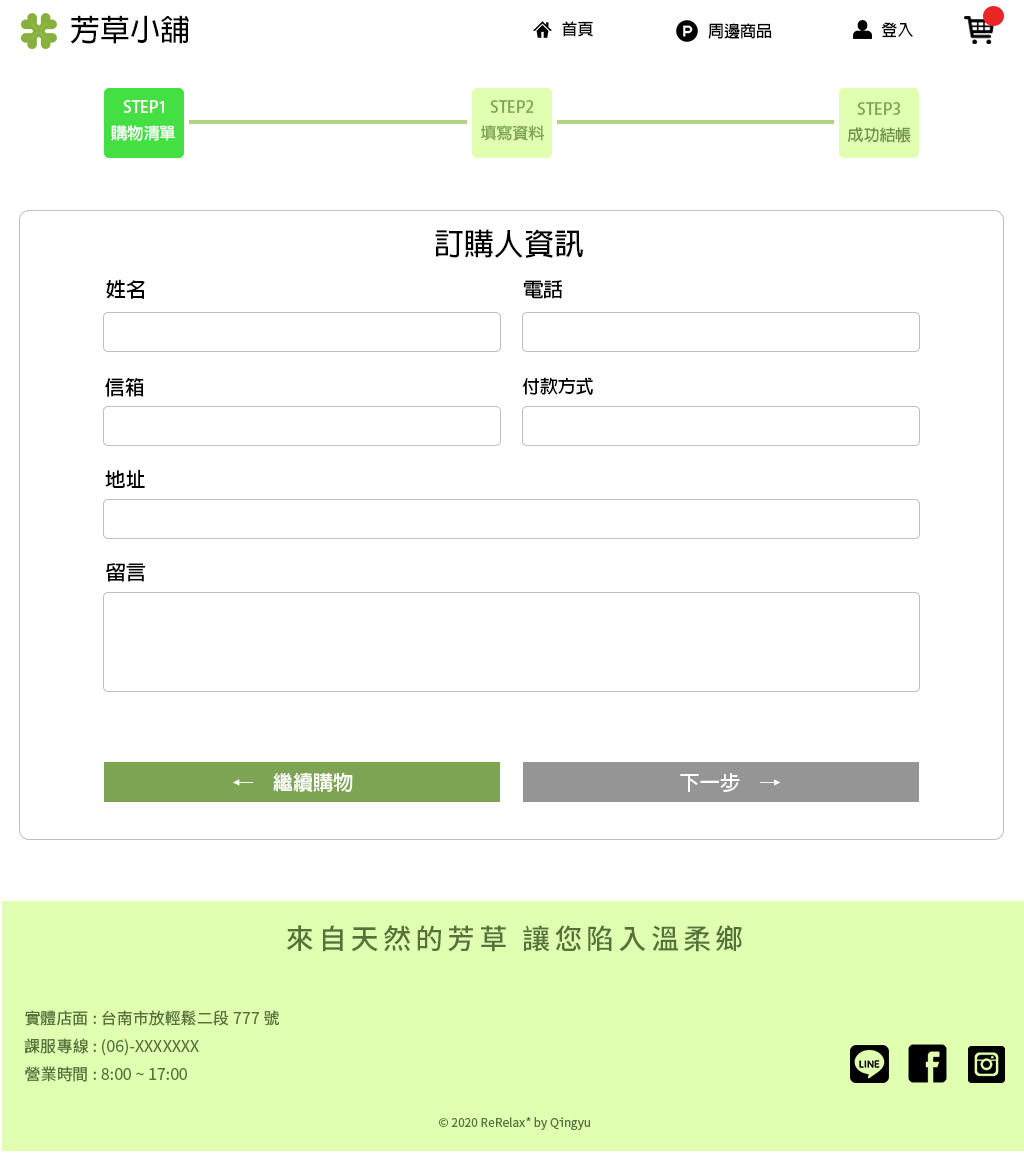
<style>
.page{position:relative;width:1024px;height:1153px;background:#ffffff}
.page>*{position:absolute;margin:0}
.t1{font:30px "AdobeFanHeitiStd-Bold";color:#000000}
.t2{font:16px "AdobeFanHeitiStd-Bold";color:#000000}
.t3{font:16px "AdobeFanHeitiStd-Bold";color:#ffffff}
.t4{font:16px "AdobeFanHeitiStd-Bold";color:#7da453}
.t5{font:16px "AdobeFanHeitiStd-Bold";color:#70934a}
.t6{font:20px "AdobeFanHeitiStd-Bold";color:#000000}
.t7{font:18px "AdobeFanHeitiStd-Bold";color:#000000}
.t8{font:20px "AdobeFanHeitiStd-Bold";color:#ffffff}
.t9{font:20px "AdobeFanHeitiStd-Bold";color:#fefefe}
.t10{font:28px "NotoSansTC-Medium";letter-spacing:0.15em;color:#567139}
.t11{font:16px "NotoSansTC-Regular";color:#567139}
.t12{font:12px "NotoSansTC-Regular";color:#567139}
</style>
<div class="page">
<p class="t1" style="left:70px;top:15px;width:119px;height:29px">芳草小舖</p>
<p class="t2" style="left:562px;top:21px;width:31px;height:16px">首頁</p>
<p class="t2" style="left:708px;top:23px;width:64px;height:16px">周邊商品</p>
<p class="t2" style="left:881px;top:22px;width:32px;height:16px">登入</p>
<p class="t3" style="left:123px;top:100px;width:41px;height:13px">STEP1</p>
<p class="t4" style="left:490px;top:100px;width:44px;height:13px">STEP2</p>
<p class="t4" style="left:857px;top:102px;width:44px;height:13px">STEP3</p>
<p class="t3" style="left:111px;top:125px;width:64px;height:16px">購物清單</p>
<p class="t4" style="left:480px;top:125px;width:64px;height:16px">填寫資料</p>
<p class="t5" style="left:847px;top:127px;width:64px;height:16px">成功結帳</p>
<p class="t1" style="left:435px;top:229px;width:148px;height:29px">訂購人資訊</p>
<p class="t6" style="left:106px;top:279px;width:39px;height:20px">姓名</p>
<p class="t6" style="left:523px;top:280px;width:39px;height:19px">電話</p>
<p class="t6" style="left:105px;top:377px;width:39px;height:20px">信箱</p>
<p class="t7" style="left:522px;top:377px;width:71px;height:18px">付款方式</p>
<p class="t6" style="left:105px;top:469px;width:40px;height:19px">地址</p>
<p class="t6" style="left:105px;top:563px;width:41px;height:19px">留言</p>
<p class="t8" style="left:233px;top:772px;width:120px;height:20px">←　繼續購物</p>
<p class="t9" style="left:680px;top:773px;width:101px;height:19px">下一步　→</p>
<p class="t10" style="left:286px;top:925px;width:456px;height:27px">來自天然的芳草 讓您陷入溫柔鄉</p>
<p class="t11" style="left:24px;top:1010px;width:255px;height:72px">實體店面: 台南市放輕鬆二段777號 <br>課服專線: (06)-XXXXXXX<br>營業時間: 8:00 ~ 17:00</p>
<p class="t12" style="left:439px;top:1117px;width:151px;height:13px">© 2020 ReRelax* by Qingyu</p>
</div>
